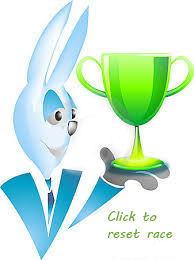
<style>
.page{position:relative;width:194px;height:260px;background:#ffffff}
.page>*{position:absolute;margin:0}
.t1{font:14px "MVBoli";color:#70aa32}
</style>
<div class="page">
<p class="t1" style="left:107px;top:211px;width:66px;height:27px">Click to <br>reset race</p>
</div>
